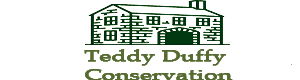
<style>
.page{position:relative;width:300px;height:80px;background:#ffffff}
.page>*{position:absolute;margin:0}
.t1{font:16px "BookAntiqua";color:#556b2f;font-weight:bold;scale:1.47 1}
</style>
<div class="page">
<p class="t1" style="left:84px;top:49px;width:149px;height:32px">Teddy Duffy <br>Conservation</p>
<p class="t1" style="left:84px;top:49px;width:149px;height:32px">Teddy Duffy <br>Conservation</p>
</div>
